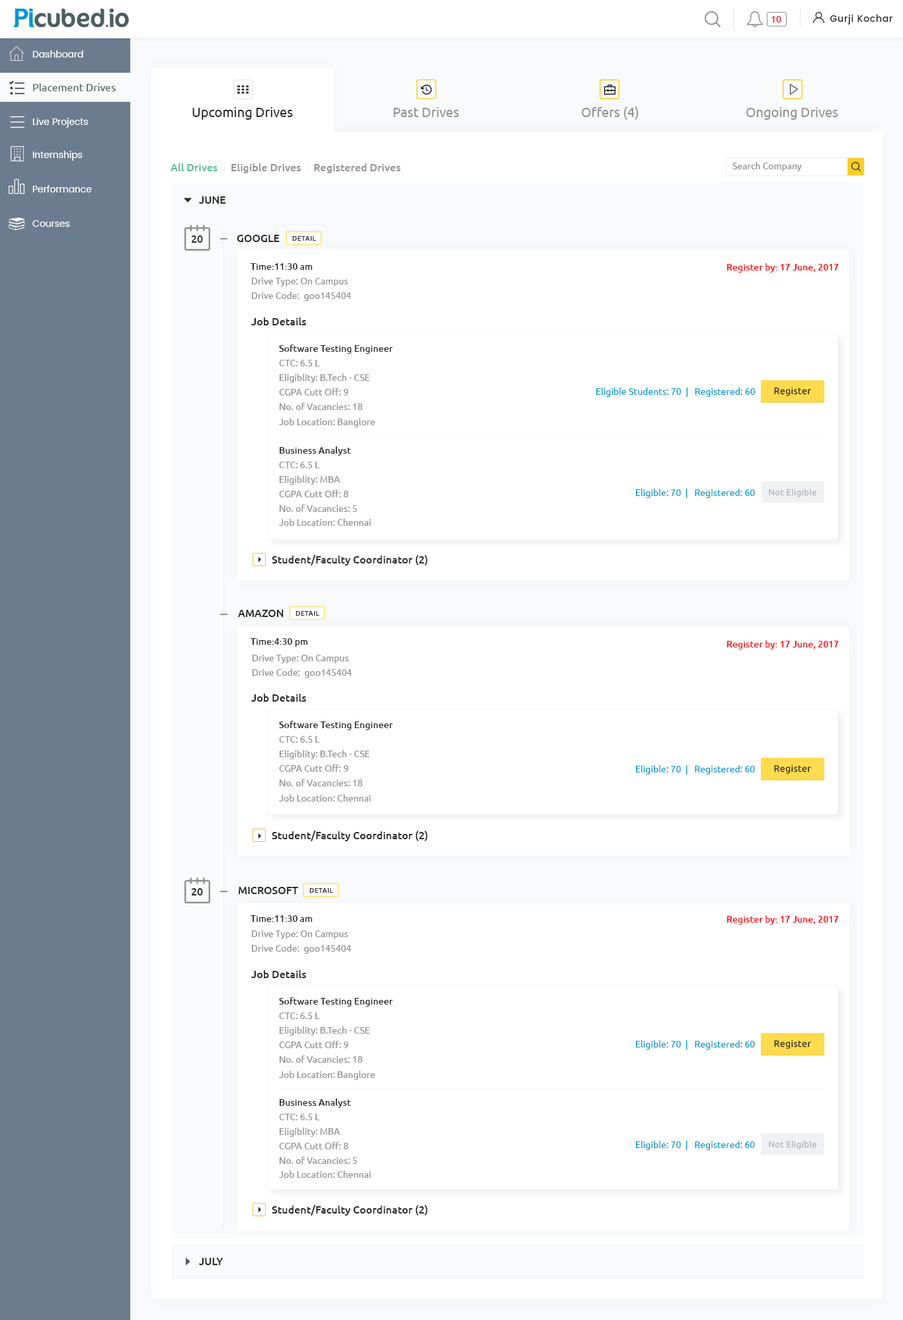
<style>
.page{position:relative;width:903px;height:1320px;background:#ffffff}
.page>*{position:absolute;margin:0}
.t1{font:9.3px "Ubuntu";color:#ff0000}
.t2{font:9.3px "Poppins-Regular";color:#ffffff}
.t3{font:10.6px "Ubuntu";color:#4c5d62}
.t4{font:13.2px "Ubuntu";color:#282828}
.t5{font:13.2px "Ubuntu";color:#909090}
.t6{font:10.6px "Ubuntu-Medium";color:#57bc90}
.t7{font:10.6px "Ubuntu-Medium";color:#909090}
.t8{font:9.3px "Ubuntu";color:#909090}
.t9{font:10.6px "Ubuntu-Medium";color:#282828;text-transform:uppercase}
.t10{font:6.6px "Ubuntu-Medium";letter-spacing:0.05em;color:#282828;text-transform:uppercase}
.t11{font:9.3px "Ubuntu-Medium";color:#282828}
.t12{font:9.3px "Ubuntu-Medium";color:#ff0000}
.t13{font:9.3px/14.5px "Ubuntu";color:#909090}
.t14{font:10.6px "Ubuntu-Medium";color:#282828}
.t15{font:9.3px "Ubuntu";color:#0099d2}
.t16{font:9.3px "Ubuntu";letter-spacing:0.03em;color:#282828}
.t17{font:8.6px "Ubuntu";letter-spacing:0.03em;color:#b2b3b4}
</style>
<div class="page">
<p class="t1" style="left:772px;top:16px;width:10px;height:6px">10</p>
<p class="t2" style="left:32px;top:50px;width:51px;height:8px">Dashboard</p>
<p class="t3" style="left:33px;top:83px;width:83px;height:8px">Placement Drives</p>
<p class="t4" style="left:192px;top:107px;width:101px;height:13px">Upcoming Drives</p>
<p class="t5" style="left:393px;top:107px;width:66px;height:10px">Past Drives</p>
<p class="t5" style="left:582px;top:106px;width:57px;height:14px">Offers (4)</p>
<p class="t5" style="left:747px;top:107px;width:92px;height:13px">Ongoing Drives</p>
<p class="t2" style="left:32px;top:118px;width:56px;height:10px">Live Projects</p>
<p class="t2" style="left:32px;top:151px;width:51px;height:10px">Internships</p>
<p class="t6" style="left:171px;top:163px;width:47px;height:8px">All Drives</p>
<p class="t7" style="left:231px;top:163px;width:170px;height:10px">Eligible Drives     Registered Drives</p>
<p class="t8" style="left:733px;top:162px;width:69px;height:9px">Search Company</p>
<p class="t2" style="left:32px;top:185px;width:60px;height:7px">Performance</p>
<p class="t9" style="left:199px;top:196px;width:27px;height:8px">June</p>
<p class="t2" style="left:32px;top:220px;width:38px;height:7px">Courses</p>
<p class="t9" style="left:191px;top:235px;width:12px;height:8px">20</p>
<p class="t9" style="left:237px;top:235px;width:43px;height:7px">Google</p>
<p class="t10" style="left:292px;top:236px;width:24px;height:5px">Detail</p>
<p class="t11" style="left:251px;top:263px;width:62px;height:7px">Time:11:30 am</p>
<p class="t12" style="left:727px;top:263px;width:112px;height:9px">Register by: 17 June, 2017</p>
<p class="t13" style="left:252px;top:278px;width:99px;height:23px">Drive Type: On Campus<br>Drive Code:  goo145404</p>
<p class="t14" style="left:251px;top:317px;width:55px;height:8px">Job Details</p>
<p class="t11" style="left:279px;top:345px;width:114px;height:9px">Software Testing Engineer</p>
<p class="t13" style="left:279px;top:360px;width:91px;height:50px">CTC: 6.5 L<br>Eligiblity: B.Tech - CSE<br>CGPA Cutt Off: 9<br>No. of Vacancies: 18</p>
<p class="t15" style="left:597px;top:388px;width:158px;height:9px">Eligible Students: 70  |   Registered: 60</p>
<p class="t16" style="left:774px;top:387px;width:37px;height:9px">Register</p>
<p class="t8" style="left:279px;top:418px;width:97px;height:9px">Job Location: Banglore</p>
<p class="t11" style="left:280px;top:446px;width:71px;height:10px">Business Analyst</p>
<p class="t13" style="left:279px;top:462px;width:78px;height:50px">CTC: 6.5 L<br>Eligiblity: MBA<br>CGPA Cutt Off: 8<br>No. of Vacancies: 5</p>
<p class="t15" style="left:636px;top:489px;width:119px;height:9px">Eligible: 70  |   Registered: 60</p>
<p class="t17" style="left:769px;top:488px;width:48px;height:9px">Not Eligible</p>
<p class="t8" style="left:279px;top:518px;width:92px;height:8px">Job Location: Chennai</p>
<p class="t14" style="left:272px;top:555px;width:156px;height:10px">Student/Faculty Coordinator (2)</p>
<p class="t9" style="left:238px;top:610px;width:46px;height:7px">Amazon</p>
<p class="t10" style="left:296px;top:611px;width:23px;height:5px">Detail</p>
<p class="t11" style="left:251px;top:638px;width:57px;height:9px">Time:4:30 pm</p>
<p class="t12" style="left:727px;top:640px;width:112px;height:9px">Register by: 17 June, 2017</p>
<p class="t13" style="left:253px;top:655px;width:99px;height:23px">Drive Type: On Campus<br>Drive Code:  goo145404</p>
<p class="t14" style="left:251px;top:694px;width:55px;height:8px">Job Details</p>
<p class="t11" style="left:279px;top:721px;width:114px;height:9px">Software Testing Engineer</p>
<p class="t13" style="left:279px;top:736px;width:91px;height:50px">CTC: 6.5 L<br>Eligiblity: B.Tech - CSE<br>CGPA Cutt Off: 9<br>No. of Vacancies: 18</p>
<p class="t15" style="left:636px;top:765px;width:119px;height:9px">Eligible: 70  |   Registered: 60</p>
<p class="t16" style="left:774px;top:764px;width:37px;height:10px">Register</p>
<p class="t8" style="left:279px;top:794px;width:92px;height:8px">Job Location: Chennai</p>
<p class="t14" style="left:272px;top:831px;width:156px;height:10px">Student/Faculty Coordinator (2)</p>
<p class="t9" style="left:191px;top:888px;width:12px;height:7px">20</p>
<p class="t9" style="left:239px;top:887px;width:59px;height:7px">Microsoft</p>
<p class="t10" style="left:309px;top:888px;width:24px;height:5px">Detail</p>
<p class="t11" style="left:251px;top:915px;width:62px;height:7px">Time:11:30 am</p>
<p class="t12" style="left:727px;top:915px;width:112px;height:10px">Register by: 17 June, 2017</p>
<p class="t13" style="left:252px;top:930px;width:99px;height:24px">Drive Type: On Campus<br>Drive Code:  goo145404</p>
<p class="t14" style="left:251px;top:970px;width:55px;height:8px">Job Details</p>
<p class="t11" style="left:279px;top:997px;width:114px;height:10px">Software Testing Engineer</p>
<p class="t13" style="left:279px;top:1012px;width:91px;height:51px">CTC: 6.5 L<br>Eligiblity: B.Tech - CSE<br>CGPA Cutt Off: 9<br>No. of Vacancies: 18</p>
<p class="t15" style="left:636px;top:1040px;width:119px;height:10px">Eligible: 70  |   Registered: 60</p>
<p class="t16" style="left:774px;top:1040px;width:37px;height:9px">Register</p>
<p class="t8" style="left:279px;top:1071px;width:97px;height:9px">Job Location: Banglore</p>
<p class="t11" style="left:280px;top:1098px;width:71px;height:10px">Business Analyst</p>
<p class="t13" style="left:279px;top:1114px;width:78px;height:50px">CTC: 6.5 L<br>Eligiblity: MBA<br>CGPA Cutt Off: 8<br>No. of Vacancies: 5</p>
<p class="t15" style="left:636px;top:1141px;width:119px;height:9px">Eligible: 70  |   Registered: 60</p>
<p class="t17" style="left:769px;top:1140px;width:48px;height:9px">Not Eligible</p>
<p class="t8" style="left:279px;top:1171px;width:92px;height:7px">Job Location: Chennai</p>
<p class="t14" style="left:272px;top:1205px;width:156px;height:11px">Student/Faculty Coordinator (2)</p>
<p class="t9" style="left:199px;top:1258px;width:25px;height:7px">July</p>
</div>
